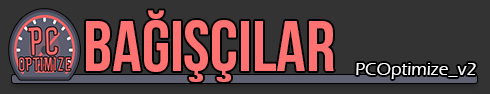
<style>
.page{position:relative;width:490px;height:94px;background:#333333}
.page>*{position:absolute;margin:0}
.t1{font:72px "BebasNeue";color:#ff7272}
.t2{font:18px "ErasITC-Medium";color:#ffffff}
</style>
<div class="page">
<p class="t1" style="left:86px;top:10px;width:248px;height:72px">BAĞIŞÇILAR</p>
<p class="t2" style="left:356px;top:63px;width:120px;height:16px">PCOptimize_v2</p>
</div>
